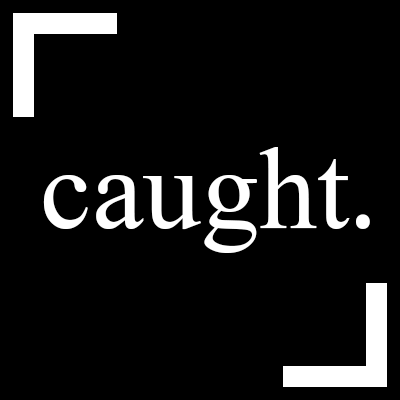
<style>
.page{position:relative;width:400px;height:400px;background:#000000}
.page>*{position:absolute;margin:0}
.t1{font:115.9px "TimesNewRomanPSMT";color:#ffffff}
.t2{font:115.9px "MyriadPro-Regular";color:#ffffff}
</style>
<div class="page">
<p class="t1" style="left:43px;top:147px;width:327px;height:106px">caught<span class="t2">.</span></p>
</div>
